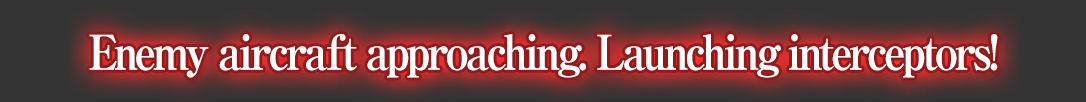
<style>
.page{position:relative;width:1086px;height:102px;background:#333333}
.page>*{position:absolute;margin:0}
.t1{font:48px "RyuminPro-ExBold";letter-spacing:-0.08em;color:#ffffff;scale:0.9 1}
</style>
<div class="page">
<p class="t1" style="left:89px;top:34px;width:909px;height:44px">Enemy aircraft approaching. Launching interceptors!</p>
</div>
